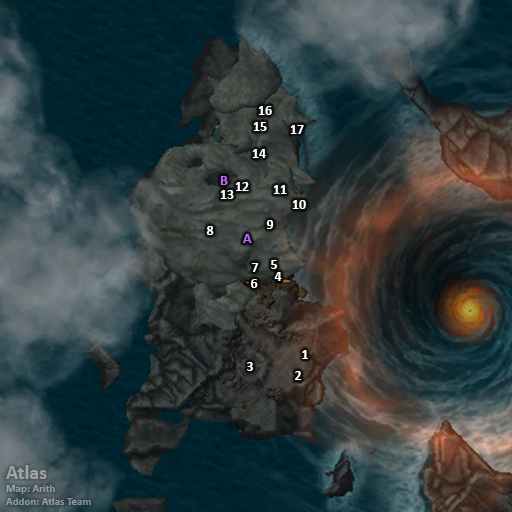
<style>
.page{position:relative;width:512px;height:512px}
.page>*{position:absolute;margin:0}
.t1{font:14px "Calibri-Bold";color:#ffffff}
.t2{font:14px "Calibri-Bold";color:#bb66ff}
.t3{font:11px "Calibri-Bold";color:#98a1a4}
.t4{font:20px "Calibri-Bold";color:#98a1a4}
</style>
<div class="page">
<p class="t1" style="left:258px;top:106px;width:14px;height:9px">16</p>
<p class="t1" style="left:253px;top:122px;width:14px;height:9px">15</p>
<p class="t1" style="left:290px;top:125px;width:14px;height:9px">17</p>
<p class="t1" style="left:252px;top:149px;width:14px;height:9px">14</p>
<p class="t2" style="left:220px;top:176px;width:8px;height:9px">B</p>
<p class="t1" style="left:235px;top:182px;width:14px;height:9px">12</p>
<p class="t1" style="left:273px;top:185px;width:14px;height:9px">11</p>
<p class="t1" style="left:220px;top:190px;width:14px;height:9px">13</p>
<p class="t1" style="left:292px;top:200px;width:14px;height:9px">10</p>
<p class="t1" style="left:266px;top:220px;width:8px;height:9px">9</p>
<p class="t1" style="left:206px;top:226px;width:8px;height:9px">8</p>
<p class="t2" style="left:243px;top:234px;width:9px;height:9px">A</p>
<p class="t1" style="left:251px;top:263px;width:8px;height:9px">7</p>
<p class="t1" style="left:271px;top:260px;width:6px;height:9px">5</p>
<p class="t1" style="left:251px;top:279px;width:7px;height:9px">6</p>
<p class="t1" style="left:274px;top:272px;width:8px;height:9px">4</p>
<p class="t1" style="left:302px;top:350px;width:6px;height:9px">1</p>
<p class="t1" style="left:247px;top:362px;width:6px;height:9px">3</p>
<p class="t1" style="left:295px;top:371px;width:7px;height:9px">2</p>
<p class="t3" style="left:6px;top:465px;width:85px;height:40px"><span class="t4">Atlas<br></span>Map: Arith<br>Addon: Atlas Team</p>
</div>
